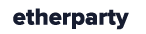
<style>
.page{position:relative;width:146px;height:34px;background:#ffffff}
.page>*{position:absolute;margin:0}
.t1{font:24px "ProximaNova-Extrabld";color:#161c30}
</style>
<div class="page">
<p class="t1" style="left:13px;top:8px;width:116px;height:22px">etherparty</p>
</div>
